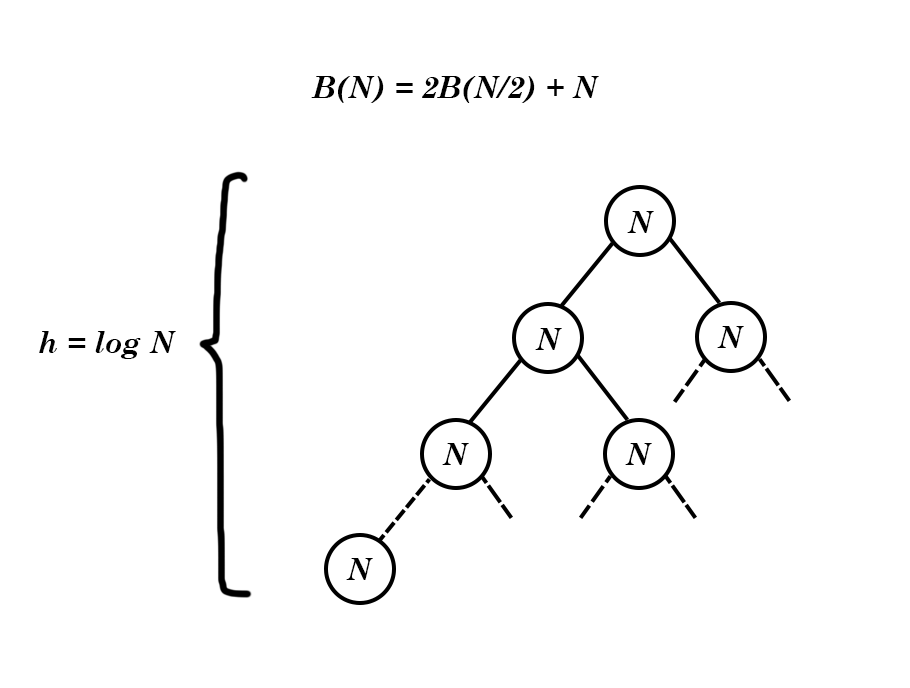
<style>
.page{position:relative;width:910px;height:688px;background:#ffffff}
.page>*{position:absolute;margin:0}
.t1{font:30px "CenturySchoolbook-BoldItalic";color:#000000}
</style>
<div class="page">
<p class="t1" style="left:311px;top:76px;width:288px;height:27px">B(N) = 2B(N/2) + N</p>
<p class="t1" style="left:627px;top:211px;width:27px;height:22px">N</p>
<p class="t1" style="left:535px;top:328px;width:27px;height:22px">N</p>
<p class="t1" style="left:717px;top:326px;width:27px;height:22px">N</p>
<p class="t1" style="left:39px;top:331px;width:137px;height:28px">h = log N</p>
<p class="t1" style="left:442px;top:443px;width:27px;height:22px">N</p>
<p class="t1" style="left:625px;top:443px;width:27px;height:22px">N</p>
<p class="t1" style="left:346px;top:558px;width:27px;height:22px">N</p>
</div>
